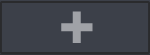
<style>
.page{position:relative;width:150px;height:55px;background:#3c4049}
.page>*{position:absolute;margin:0}
.t1{font:61.8px "FrutigerLTStd-Black";letter-spacing:0.066em;color:#a0a2a7}
</style>
<div class="page">
<p class="t1" style="left:61px;top:11px;width:32px;height:32px">+</p>
<p class="t1" style="left:61px;top:11px;width:32px;height:32px">+</p>
</div>
